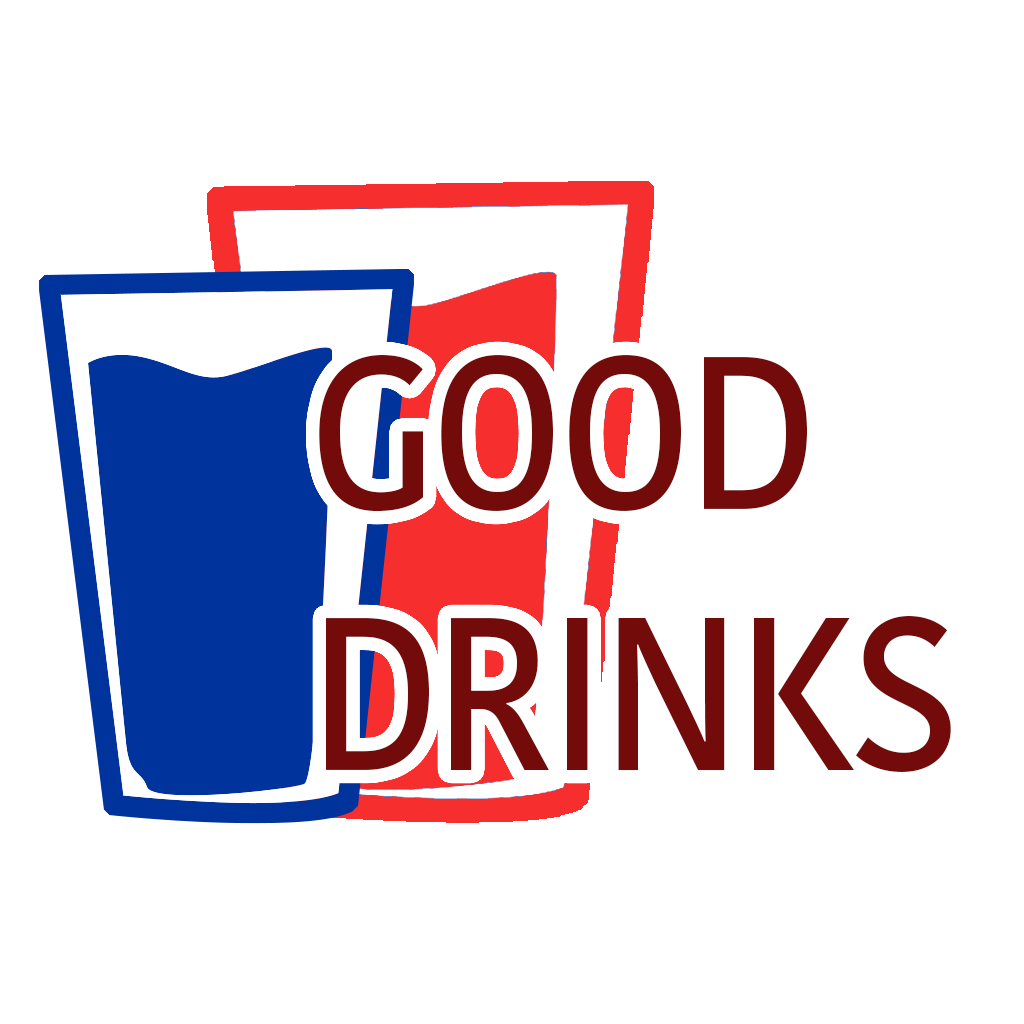
<style>
.page{position:relative;width:1024px;height:1024px;background:#ffffff}
.page>*{position:absolute;margin:0}
.t1{font:216.9px "KohinoorDevanagari-Medium";letter-spacing:-0.035em;color:#730b0b;scale:0.93 1}
</style>
<div class="page">
<p class="t1" style="left:319px;top:355px;width:632px;height:417px">GOOD <br>DRINKS</p>
</div>
